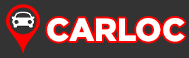
<style>
.page{position:relative;width:189px;height:58px;background:#333333}
.page>*{position:absolute;margin:0}
.t1{font:32px "Gotham-Black";color:#ffffff}
</style>
<div class="page">
<p class="t1" style="left:47px;top:18px;width:138px;height:24px">CARLOC</p>
</div>
